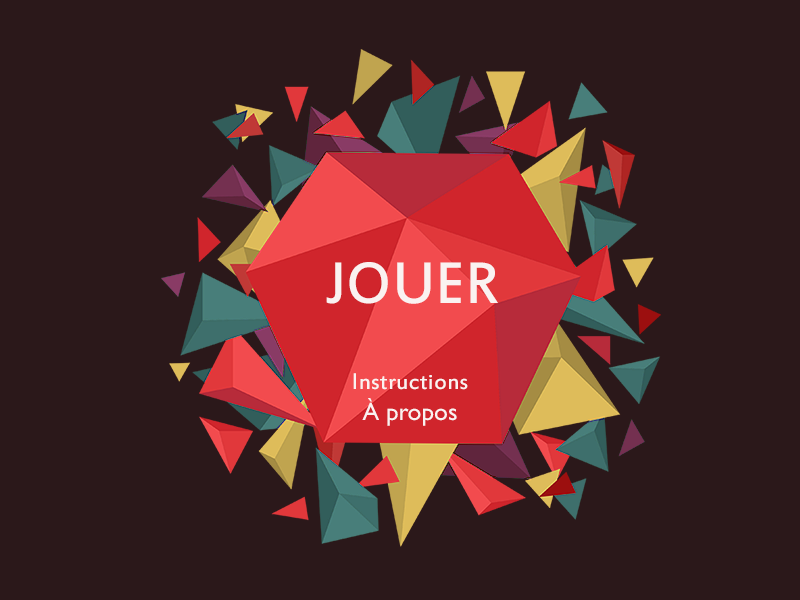
<style>
.page{position:relative;width:800px;height:600px;background:#2b181a}
.page>*{position:absolute;margin:0}
.t1{font:63.9px "EstrangeloEdessa";color:#faf2f1}
.t2{font:25px "EstrangeloEdessa";color:#faf2f1}
.t3{font:25px "GillSansMT";color:#faf2f1}
</style>
<div class="page">
<p class="t1" style="left:326px;top:262px;width:172px;height:42px">JOUER</p>
<p class="t2" style="left:353px;top:373px;width:115px;height:17px">Instructions</p>
<p class="t3" style="left:362px;top:398px;width:95px;height:28px">À propos</p>
</div>
